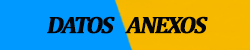
<style>
.page{position:relative;width:250px;height:50px;background:#0099ff}
.page>*{position:absolute;margin:0}
.t1{font:24px "Cambria-Bold";letter-spacing:-0.1em;color:#030509;font-weight:bold;font-style:italic}
</style>
<div class="page">
<p class="t1" style="left:47px;top:16px;width:161px;height:18px">DATOS    ANEXOS</p>
</div>
